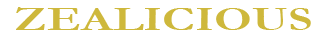
<style>
.page{position:relative;width:322px;height:38px;background:#ffffff}
.page>*{position:absolute;margin:0}
.t1{font:49.3px "Garamond-Bold";color:#ceb83c;font-variant:small-caps;scale:1.39 1}
</style>
<div class="page">
<p class="t1" style="left:16px;top:7px;width:295px;height:23px">zealicious</p>
</div>
